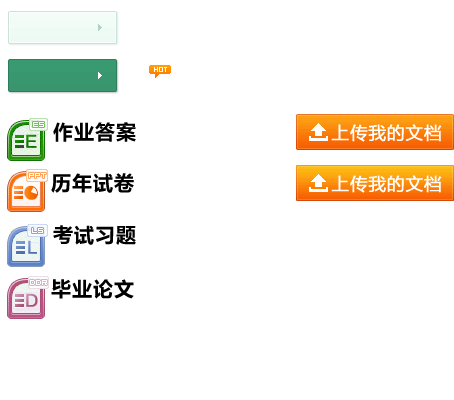
<style>
.page{position:relative;width:454px;height:400px;background:#ffffff}
.page>*{position:absolute;margin:0}
.t1{font:20px "MicrosoftYaHei-Bold";letter-spacing:0.05em;color:#000000}
</style>
<div class="page">
<p class="t1" style="left:53px;top:122px;width:83px;height:20px">作业答案</p>
<p class="t1" style="left:51px;top:173px;width:83px;height:20px">历年试卷</p>
<p class="t1" style="left:53px;top:225px;width:83px;height:20px">考试习题</p>
<p class="t1" style="left:51px;top:279px;width:83px;height:20px">毕业论文</p>
</div>
